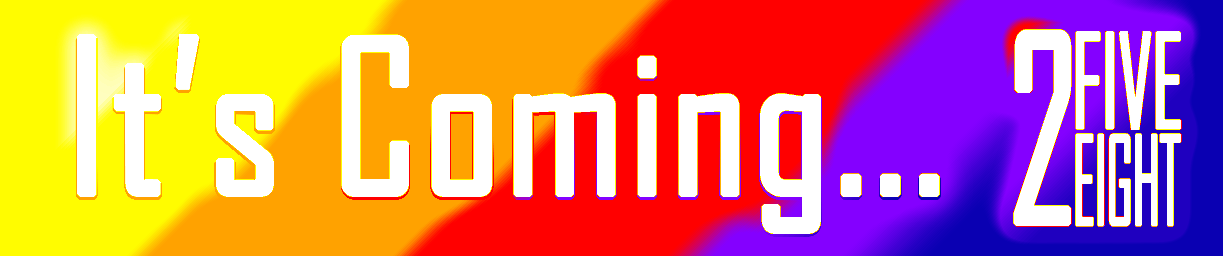
<style>
.page{position:relative;width:1223px;height:256px}
.page>*{position:absolute;margin:0}
.t1{font:250px "AgencyFB-Reg";color:#fefefe;font-weight:bold;scale:0.69 1}
.t2{font:205px "AgencyFB-Reg";color:#fefefe;font-weight:bold}
.t3{font:125px "AgencyFB-Reg";letter-spacing:-0.04em;color:#fefefe;font-weight:bold;scale:0.72 1}
.t4{font:118.5px "AgencyFB-Reg";letter-spacing:-0.04em;color:#fefefe;font-weight:bold;scale:0.53 1}
</style>
<div class="page">
<p class="t1" style="left:1013px;top:29px;width:59px;height:198px">2</p>
<p class="t2" style="left:77px;top:34px;width:863px;height:200px">It’s Coming...</p>
<p class="t3" style="left:1075px;top:31px;width:107px;height:99px">FIVE</p>
<p class="t4" style="left:1075px;top:133px;width:107px;height:94px">EIGHT</p>
</div>
